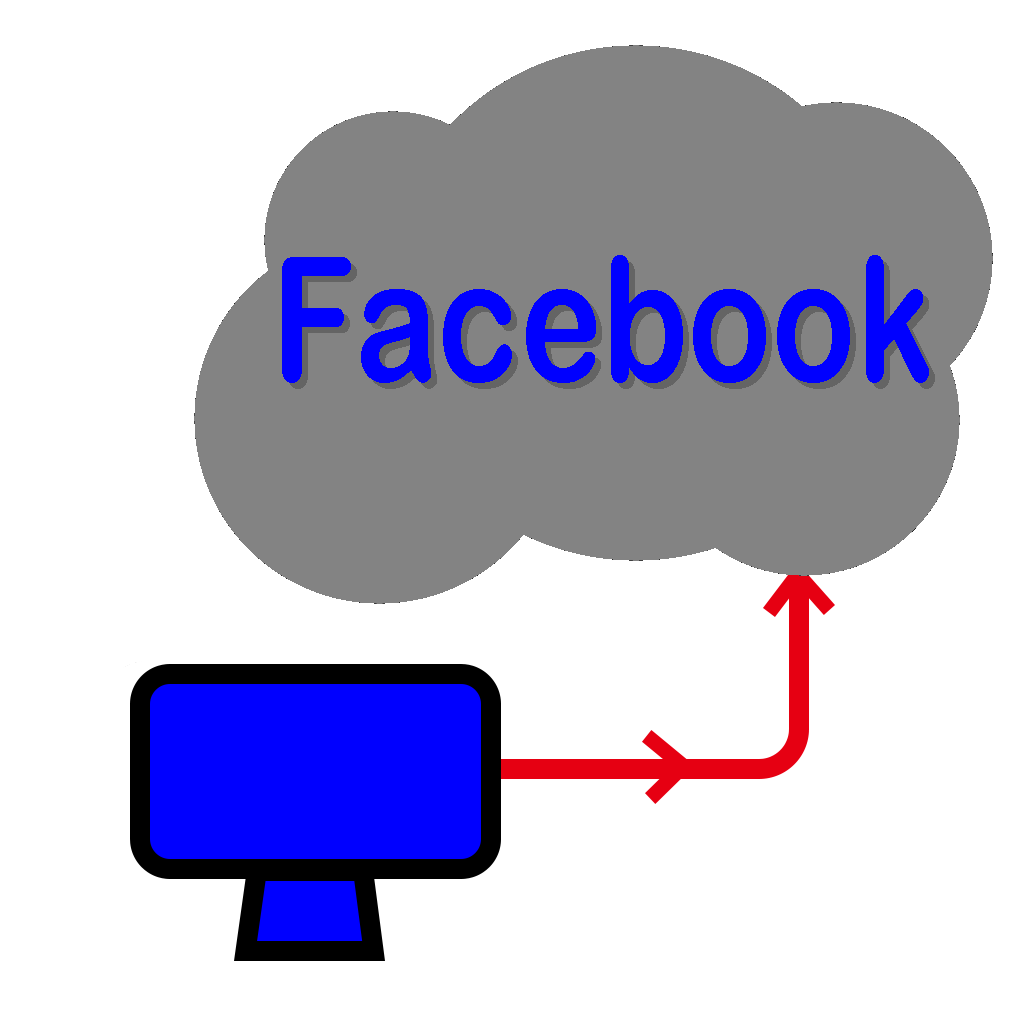
<style>
.page{position:relative;width:1024px;height:1024px;background:#ffffff}
.page>*{position:absolute;margin:0}
.t1{font:172.8px "ArialRoundedMTBold";color:#0000ff;scale:0.8 1}
</style>
<div class="page">
<p class="t1" style="left:282px;top:255px;width:647px;height:128px">Facebook</p>
</div>
